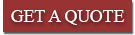
<style>
.page{position:relative;width:135px;height:35px;background:#993333}
.page>*{position:absolute;margin:0}
.t1{font:18px "TimesNewRomanPSMT";color:#ffffff;text-transform:uppercase}
</style>
<div class="page">
<p class="t1" style="left:11px;top:10px;width:114px;height:15px">Get A Quote</p>
</div>
